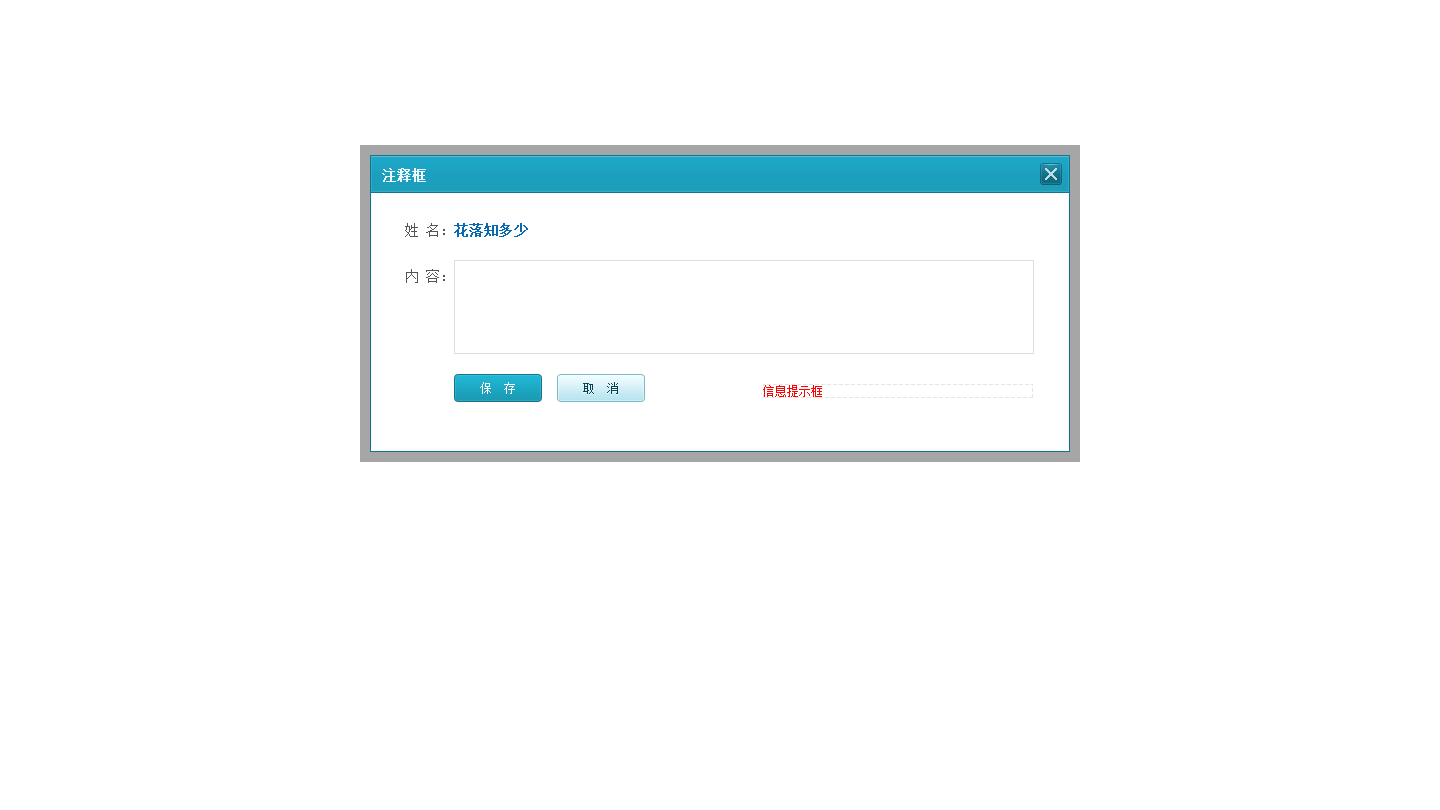
<style>
.page{position:relative;width:1440px;height:810px;background:#ffffff}
.page>*{position:absolute;margin:0}
.t1{font:14px "SimSun";color:#eef7fe;font-weight:bold}
.t2{font:14px/46px "SimSun";color:#0869b0;font-weight:bold}
.t3{font:14px/46px "SimSun";color:#555555}
.t4{font:12px "SimSun";color:#ffffff}
.t5{font:12px "SimSun";color:#044455}
</style>
<div class="page">
<p class="t1" style="left:382px;top:168px;width:44px;height:14px">注释框</p>
<p class="t2" style="left:405px;top:223px;width:123px;height:60px"><span class="t3">姓 名：</span>花落知多少<br><span class="t3">内 容：</span></p>
<p class="t4" style="left:480px;top:382px;width:35px;height:12px">保  存</p>
<p class="t5" style="left:583px;top:382px;width:35px;height:12px">取  消</p>
</div>
